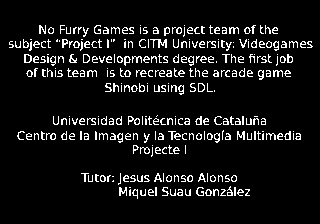
<style>
.page{position:relative;width:320px;height:224px;background:#000000}
.page>*{position:absolute;margin:0}
.t1{font:12px "Candara";color:#ffffff}
</style>
<div class="page">
<p class="t1" style="left:8px;top:24px;width:305px;height:71px;text-align:center">No Furry Games is a project team of the <br>subject “Project I”  in CITM University: Videogames<br>Design &amp; Developments degree. The first job <br>of this team  is to recreate the arcade game <br>Shinobi using SDL.</p>
<p class="t1" style="left:17px;top:115px;width:285px;height:42px;text-align:center">Universidad Politécnica de Cataluña<br>Centro de la Imagen y la Tecnología Multimedia<br>Projecte I</p>
<p class="t1" style="left:81px;top:172px;width:169px;height:27px;text-align:center">Tutor: Jesus Alonso Alonso<br>             Miquel Suau González</p>
</div>
